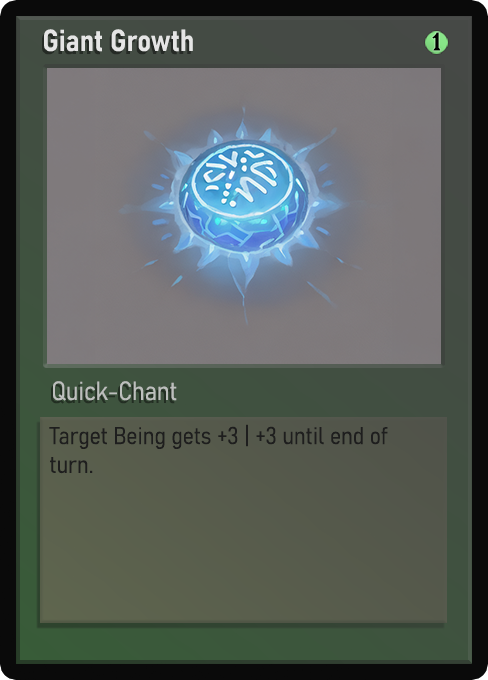
<style>
.page{position:relative;width:488px;height:680px}
.page>*{position:absolute;margin:0}
.t1{font:30px "Bahnschrift-SemiBoldSemiCondensed";color:#f2f2f2;font-weight:bold}
.t2{font:25px "WTRRoycroft";color:#000000;font-weight:bold;scale:1.09 1}
.t3{font:26px "Bahnschrift-LightSemiCondensed";color:#c8c8c8;font-weight:bold}
.t4{font:24px "Bahnschrift-LightSemiCondensed";color:#1e1e1e;font-weight:bold}
</style>
<div class="page">
<p class="t1" style="left:44px;top:29px;width:149px;height:23px;opacity:0.9">Giant Growth</p>
<p class="t2" style="left:432px;top:32px;width:9px;height:19px">1</p>
<p class="t3" style="left:53px;top:381px;width:124px;height:20px;opacity:0.9">Quick-Chant</p>
<p class="t4" style="left:49px;top:424px;width:339px;height:50px">Target Being gets +3 | +3 until end of turn.</p>
</div>
